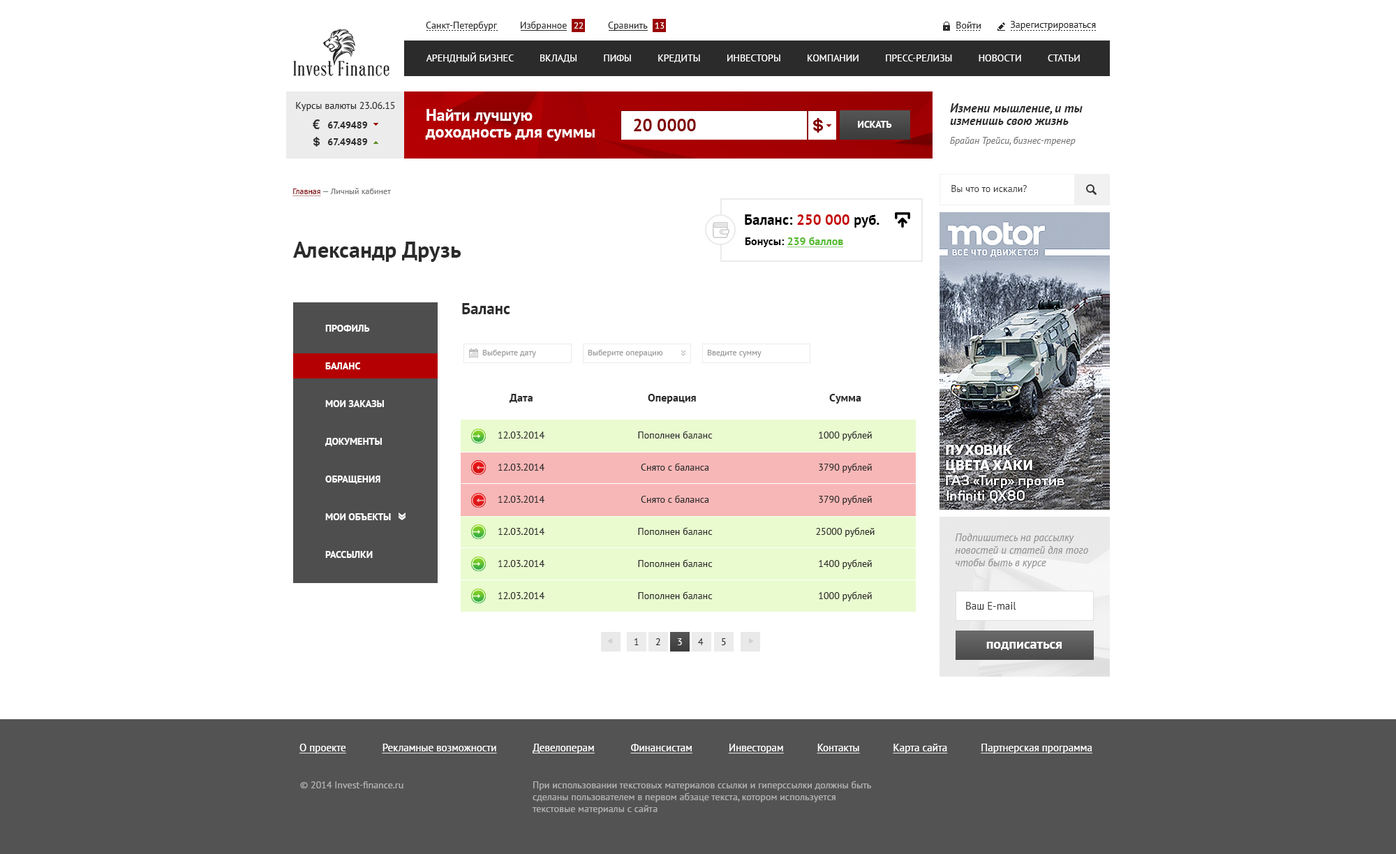
<style>
.page{position:relative;width:1396px;height:854px;background:#ffffff}
.page>*{position:absolute;margin:0}
.t1{font:9.8px "PTSans-Regular";color:#2b2b2b}
.t2{font:9.1px "PTSans-Regular";color:#ffffff}
.t3{font:9.8px "PTSans-Regular";color:#ffffff;text-transform:uppercase}
.t4{font:16.8px/16.8px "PTSans-Bold";color:#ffffff}
.t5{font:12.6px/12.6px "PTSans-BoldItalic";color:#2b2b2b}
.t6{font:9.8px/16.8px "PTSans-Bold";color:#2b2b2b}
.t7{font:17.5px "PTSans-Bold";color:#7f0002}
.t8{font:9.8px "PTSans-Bold";color:#ffffff;text-transform:uppercase}
.t9{font:9.8px "PTSans-Italic";color:#777777}
.t10{font:8.4px "PTSans-Regular";color:#777777}
.t11{font:8.4px "PTSans-Regular";color:#7f0002;text-decoration:underline}
.t12{font:14.7px "PTSans-Bold";color:#040404}
.t13{font:14.7px "PTSans-Bold";color:#c50a0e}
.t14{font:22.3px "PTSans-Bold";color:#2b2b2b}
.t15{font:11.2px "PTSans-Bold";color:#56bb2e;text-decoration:underline}
.t16{font:11.2px "PTSans-Bold";color:#040404}
.t17{font:16.1px "PTSans-Bold";color:#2b2b2b}
.t18{font:9.8px/12.6px "PTSans-Bold";color:#ffffff;text-transform:uppercase}
.t19{font:8.4px "PTSans-Regular";color:#999999}
.t20{font:11.2px "PTSans-Bold";color:#2b2b2b}
.t21{font:9.8px/32.1px "PTSans-Regular";color:#2b2b2b}
.t22{font:10.5px/12.6px "PTSans-Italic";color:#777777}
.t23{font:10.5px "PTSans-Regular";color:#2b2b2b}
.t24{font:9.8px "PTSans-Regular";color:#ffffff}
.t25{font:14px "PTSans-Bold";color:#ffffff}
.t26{font:10.5px "PTSans-Regular";color:#ffffff;text-decoration:underline}
.t27{font:9.8px "PTSans-Regular";color:#9b9b9b}
</style>
<div class="page">
<p class="t1" style="left:426px;top:21px;width:71px;height:10px">Санкт-Петербург</p>
<p class="t1" style="left:521px;top:21px;width:46px;height:10px">Избранное</p>
<p class="t2" style="left:574px;top:22px;width:10px;height:7px">22</p>
<p class="t1" style="left:608px;top:22px;width:40px;height:9px">Сравнить</p>
<p class="t2" style="left:655px;top:22px;width:10px;height:7px">13</p>
<p class="t1" style="left:957px;top:22px;width:24px;height:7px">Войти</p>
<p class="t1" style="left:1010px;top:21px;width:86px;height:9px">Зарегистрироваться</p>
<p class="t3" style="left:426px;top:52px;width:654px;height:11px">Арендный бизнес          Вклады          Пифы          Кредиты          Инвесторы          Компании          Пресс-релизы          Новости          Статьи</p>
<p class="t1" style="left:296px;top:102px;width:99px;height:9px">Курсы валюты 23.06.15</p>
<p class="t4" style="left:425px;top:109px;width:170px;height:32px">Найти лучшую<br>доходность для суммы</p>
<p class="t5" style="left:950px;top:103px;width:133px;height:22px">Измени мышление, и ты<br>изменишь свою жизнь</p>
<p class="t6" style="left:327px;top:121px;width:41px;height:24px">67.49489<br>67.49489</p>
<p class="t7" style="left:634px;top:119px;width:62px;height:12px">20 0000</p>
<p class="t8" style="left:858px;top:121px;width:34px;height:7px">Искать</p>
<p class="t9" style="left:950px;top:136px;width:126px;height:10px">Брайан Трейси, бизнес-тренер</p>
<p class="t1" style="left:952px;top:185px;width:75px;height:7px">Вы что то искали?</p>
<p class="t10" style="left:293px;top:188px;width:98px;height:8px"><span class="t11">Главная </span>— Личный кабинет</p>
<p class="t12" style="left:745px;top:214px;width:135px;height:14px">Баланс: <span class="t13">250 000</span> руб.</p>
<p class="t14" style="left:293px;top:242px;width:168px;height:20px">Александр Друзь</p>
<p class="t15" style="left:745px;top:237px;width:99px;height:11px"><span class="t16">Бонусы: </span>239 баллов</p>
<p class="t17" style="left:462px;top:303px;width:48px;height:11px">Баланс</p>
<p class="t18" style="left:325px;top:325px;width:66px;height:233px">Профиль<br> <br><br>Баланс<br> <br><br>Мои заказы<br> <br> <br>Документы<br> <br><br>Обращения<br> <br><br>Мои объекты<br> <br><br>Рассылки</p>
<p class="t19" style="left:482px;top:350px;width:54px;height:7px">Выберите дату</p>
<p class="t19" style="left:588px;top:350px;width:75px;height:7px">Выберите операцию</p>
<p class="t19" style="left:707px;top:350px;width:55px;height:7px">Введите сумму</p>
<p class="t20" style="left:509px;top:394px;width:24px;height:9px">Дата</p>
<p class="t20" style="left:648px;top:394px;width:48px;height:10px">Операция</p>
<p class="t20" style="left:829px;top:394px;width:33px;height:10px">Cумма</p>
<p class="t21" style="left:498px;top:431px;width:47px;height:168px">12.03.2014<br>12.03.2014<br>12.03.2014<br>12.03.2014<br>12.03.2014<br>12.03.2014</p>
<p class="t21" style="left:638px;top:431px;width:75px;height:168px;text-align:center">Пополнен баланс<br>Снято с баланса<br>Снято с баланса<br>Пополнен баланс<br>Пополнен баланс<br>Пополнен баланс</p>
<p class="t21" style="left:816px;top:431px;width:59px;height:170px;text-align:center">1000 рублей<br>3790 рублей<br>3790 рублей<br>25000 рублей<br>1400 рублей<br>1000 рублей</p>
<p class="t22" style="left:955px;top:533px;width:134px;height:35px">Подпишитесь на рассылку<br>новостей и статей для того<br>чтобы быть в курсе</p>
<p class="t23" style="left:966px;top:602px;width:51px;height:8px">Ваш E-mail</p>
<p class="t1" style="left:634px;top:638px;width:5px;height:7px">1</p>
<p class="t1" style="left:656px;top:638px;width:5px;height:7px">2</p>
<p class="t24" style="left:678px;top:638px;width:4px;height:7px">3</p>
<p class="t1" style="left:698px;top:638px;width:6px;height:7px">4</p>
<p class="t1" style="left:722px;top:638px;width:4px;height:7px">5</p>
<p class="t25" style="left:987px;top:642px;width:75px;height:8px">подписаться</p>
<p class="t26" style="left:300px;top:744px;width:793px;height:9px">О проекте             Рекламные возможности             Девелоперам             Финансистам             Инвесторам            Контакты            Карта сайта            Партнерская программа</p>
<p class="t27" style="left:300px;top:781px;width:104px;height:7px">© 2014 Invest-finance.ru</p>
<p class="t27" style="left:532px;top:781px;width:339px;height:33px">При использовании текстовых материалов ссылки и гиперссылки должны быть <br>сделаны пользователем в первом абзаце текста, котором используется<br>текстовые материалы с сайта</p>
</div>
